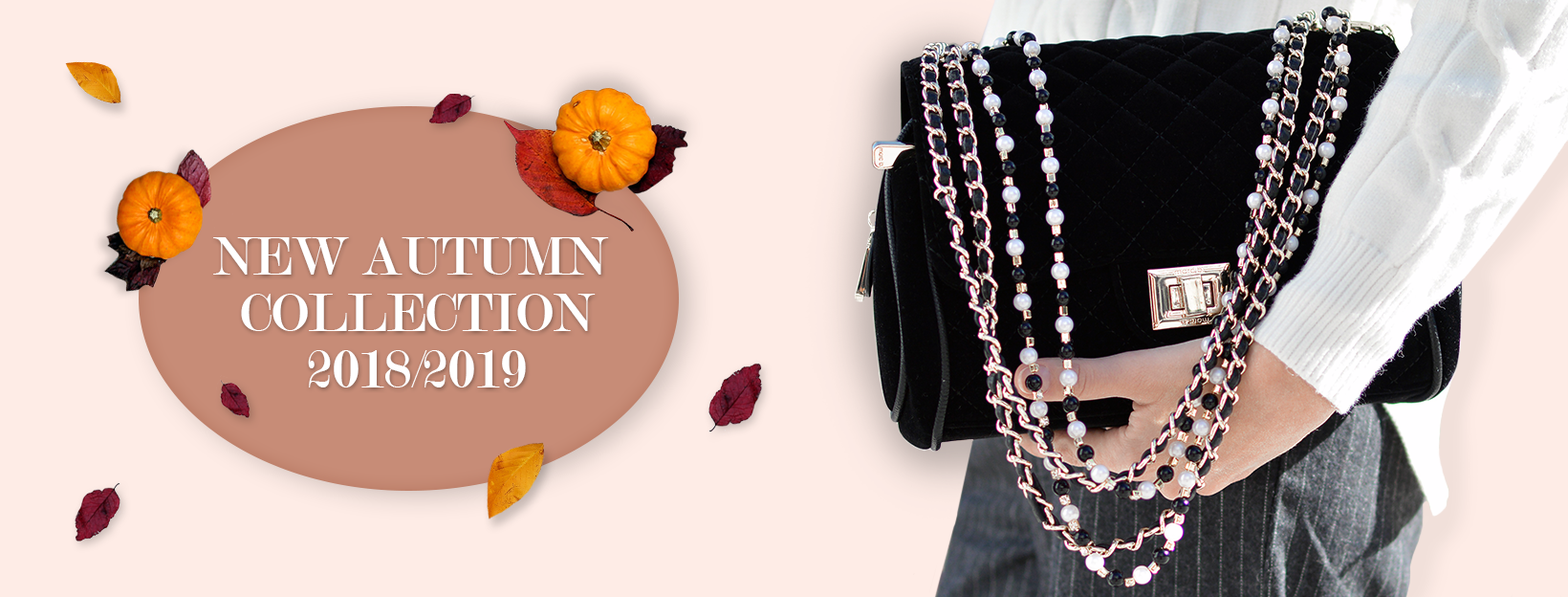
<style>
.page{position:relative;width:1568px;height:597px;background:#feece6}
.page>*{position:absolute;margin:0}
.t1{font:57.4px/56.4px "Modern-Regular";color:#ffffff}
</style>
<div class="page">
<p class="t1" style="left:213px;top:237px;width:396px;height:150px;text-align:center">NEW AUTUMN <br>COLLECTION<br>2018/2019</p>
</div>
